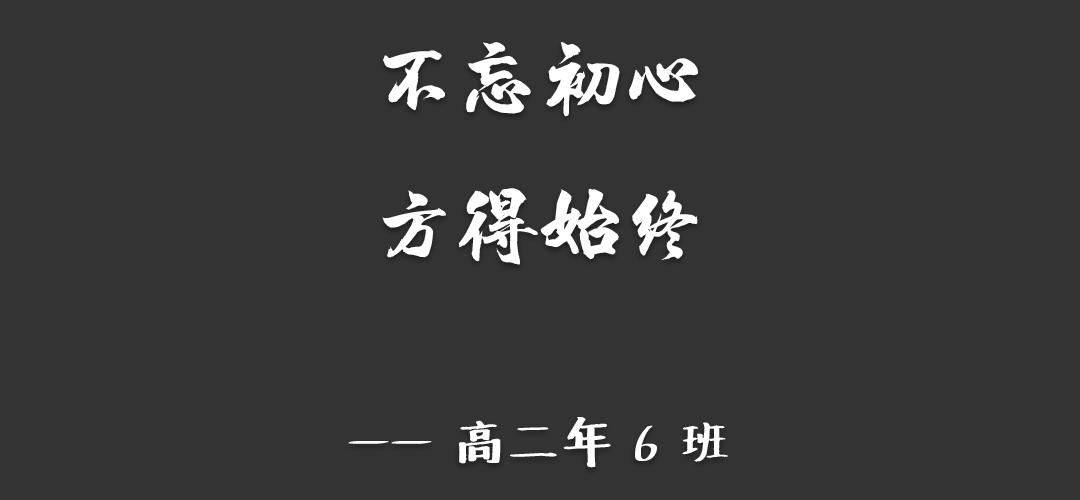
<style>
.page{position:relative;width:1080px;height:500px;background:#333333}
.page>*{position:absolute;margin:0}
.t1{font:50px "Undefined";color:#ffffff}
.t2{font:83.3px "HYChengXingJ";color:#ffffff}
</style>
<div class="page">
<p class="t1" style="left:348px;top:42px;width:380px;height:426px;text-align:center"><span class="t2">不忘初心<br>方得始终<br></span><br>—— 高二年 6 班</p>
</div>
